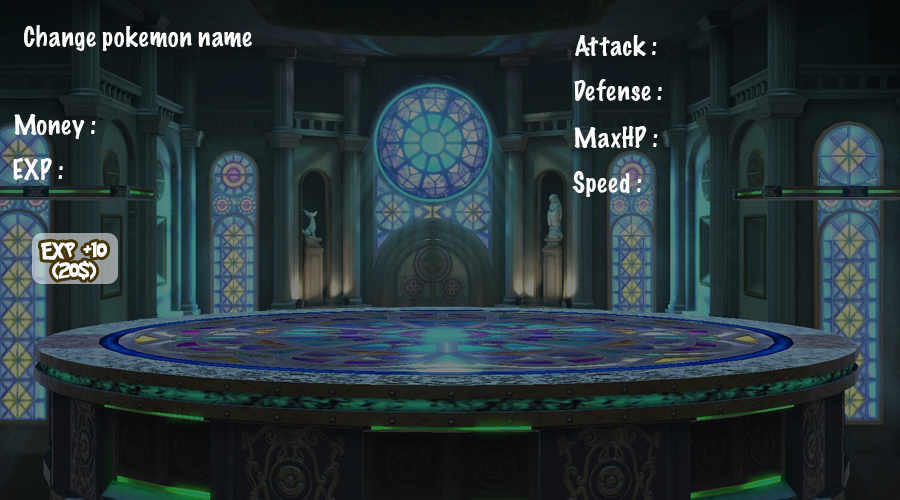
<style>
.page{position:relative;width:900px;height:500px}
.page>*{position:absolute;margin:0}
.t1{font:25px "MarkerFelt-Thin";letter-spacing:0.005em;color:#ffffff}
.t2{font:16.7px "PokemonSolidNormal";letter-spacing:0.05em;color:#ffffff}
</style>
<div class="page">
<p class="t1" style="left:24px;top:25px;width:228px;height:26px">Change pokemon name</p>
<p class="t1" style="left:575px;top:35px;width:82px;height:21px">Attack :</p>
<p class="t1" style="left:574px;top:79px;width:88px;height:22px">Defense :</p>
<p class="t1" style="left:14px;top:114px;width:82px;height:25px">Money :</p>
<p class="t1" style="left:574px;top:126px;width:84px;height:22px">MaxHP :</p>
<p class="t1" style="left:13px;top:158px;width:50px;height:22px">EXP :</p>
<p class="t1" style="left:572px;top:171px;width:70px;height:26px">Speed :</p>
<p class="t2" style="left:41px;top:241px;width:66px;height:39px;text-align:center">EXP +10<br>(20$)</p>
<p class="t2" style="left:41px;top:241px;width:66px;height:39px;text-align:center">EXP +10<br>(20$)</p>
</div>
